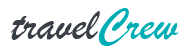
<style>
.page{position:relative;width:190px;height:53px;background:#ffffff}
.page>*{position:absolute;margin:0}
.t1{font:48px "BrushScriptMT";color:#393e46}
.t2{font:48px "BrushScriptMT";color:#00adb5}
</style>
<div class="page">
<p class="t1" style="left:11px;top:8px;width:167px;height:38px">travel<span class="t2">Crew</span></p>
</div>
